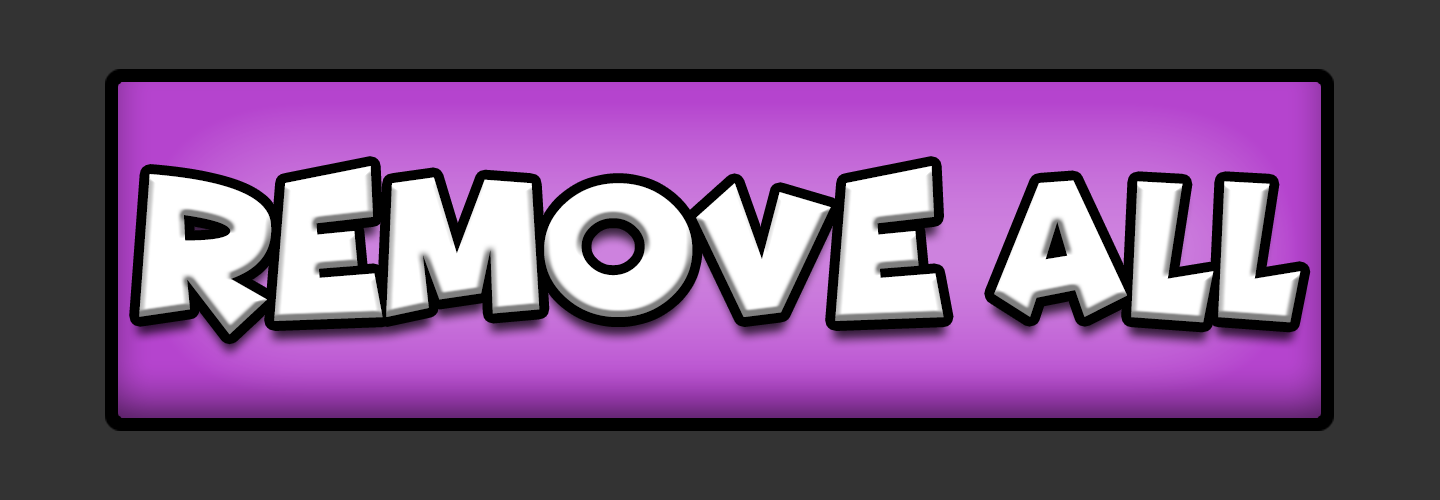
<style>
.page{position:relative;width:1440px;height:500px;background:#333333}
.page>*{position:absolute;margin:0}
.t1{font:195.6px "Funhouse";color:#ffffff;scale:0.95 1}
</style>
<div class="page">
<p class="t1" style="left:139px;top:166px;width:1162px;height:169px">REMOVE ALL</p>
</div>
